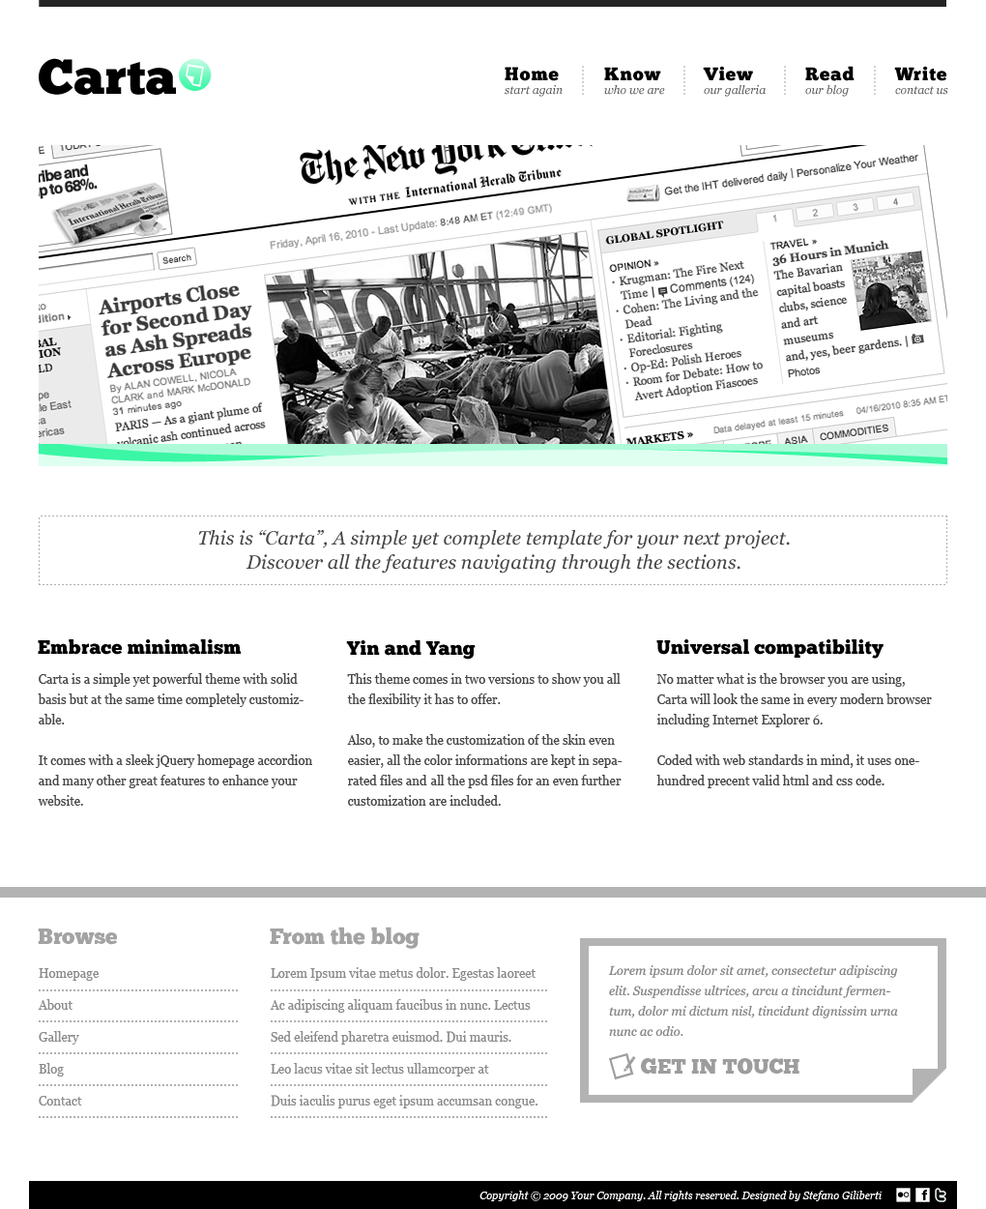
<style>
.page{position:relative;width:986px;height:1209px;background:#ffffff}
.page>*{position:absolute;margin:0}
.t1{font:49.1px "ChunkFive";color:#000000;scale:1.06 1}
.t2{font:18.4px "ChunkFive";letter-spacing:0.05em;color:#000000}
.t3{font:11.6px "Georgia-Italic";color:#555555}
.t4{font:19.3px/24.2px "Georgia-Italic";color:#474747}
.t5{font:19.3px "ChunkFive";letter-spacing:0.01em;color:#000000}
.t6{font:12.6px/20.3px "Georgia";color:#474747}
.t7{font:22.2px "ChunkFive";color:#a3a3a3}
.t8{font:12.6px/20.3px "Georgia-Italic";color:#878787}
.t9{font:12.6px "Georgia";color:#8a8a8a}
.t10{font:21.3px "ChunkFive";color:#9d9d9d}
.t11{font:10.6px "Georgia-Italic";color:#ffffff}
</style>
<div class="page">
<p class="t1" style="left:39px;top:58px;width:137px;height:37px">Carta</p>
<p class="t2" style="left:703px;top:66px;width:50px;height:15px">View</p>
<p class="t2" style="left:806px;top:66px;width:49px;height:15px">Read</p>
<p class="t2" style="left:895px;top:66px;width:52px;height:15px">Write</p>
<p class="t2" style="left:505px;top:67px;width:54px;height:14px">Home</p>
<p class="t2" style="left:604px;top:67px;width:57px;height:14px">Know</p>
<p class="t3" style="left:505px;top:85px;width:58px;height:12px">start again</p>
<p class="t3" style="left:604px;top:85px;width:61px;height:10px">who we are</p>
<p class="t3" style="left:704px;top:85px;width:62px;height:12px">our galleria</p>
<p class="t3" style="left:806px;top:85px;width:43px;height:12px">our blog</p>
<p class="t3" style="left:896px;top:86px;width:53px;height:9px">contact us</p>
<p class="t4" style="left:198px;top:530px;width:592px;height:43px;text-align:center">This is “Carta”, A simple yet complete template for your next project.<br>Discover all the features navigating through the sections.</p>
<p class="t5" style="left:38px;top:639px;width:203px;height:16px">Embrace minimalism</p>
<p class="t5" style="left:346px;top:640px;width:130px;height:20px">Yin and Yang</p>
<p class="t5" style="left:657px;top:639px;width:227px;height:20px">Universal compatibility</p>
<p class="t6" style="left:38px;top:673px;width:274px;height:133px">Carta is a simple yet powerful theme with solid basis but at the same time completely customizable.<br><br>It comes with a sleek jQuery homepage accordion <br>and many other great features to enhance your website.</p>
<p class="t6" style="left:347px;top:673px;width:276px;height:133px">This theme comes in two versions to show you all the flexibility it has to offer.<br><br>Also, to make the customization of the skin even easier, all the color informations are kept in separated files and all the psd files for an even further customization are included.</p>
<p class="t6" style="left:657px;top:673px;width:275px;height:115px">No matter what is the browser you are using, Carta will look the same in every modern browser including Internet Explorer 6.<br><br>Coded with web standards in mind, it uses one-hundred precent valid html and css code.</p>
<p class="t7" style="left:38px;top:928px;width:79px;height:17px">Browse</p>
<p class="t7" style="left:270px;top:926px;width:150px;height:23px">From the blog</p>
<p class="t8" style="left:608px;top:965px;width:290px;height:72px">Lorem ipsum dolor sit amet, consectetur adipiscing elit. Suspendisse ultrices, arcu a tincidunt fermentum, dolor mi dictum nisl, tincidunt dignissim urna nunc ac odio.</p>
<p class="t9" style="left:39px;top:968px;width:61px;height:13px">Homepage</p>
<p class="t9" style="left:271px;top:967px;width:265px;height:14px">Lorem Ipsum vitae metus dolor. Egestas laoreet</p>
<p class="t9" style="left:38px;top:999px;width:35px;height:11px">About</p>
<p class="t9" style="left:270px;top:999px;width:261px;height:14px">Ac adipiscing aliquam faucibus in nunc. Lectus</p>
<p class="t9" style="left:39px;top:1031px;width:40px;height:13px">Gallery</p>
<p class="t9" style="left:271px;top:1031px;width:241px;height:13px">Sed eleifend pharetra euismod. Dui mauris.</p>
<p class="t10" style="left:641px;top:1058px;width:159px;height:16px">GET IN TOUCH</p>
<p class="t9" style="left:39px;top:1063px;width:25px;height:13px">Blog</p>
<p class="t9" style="left:271px;top:1063px;width:218px;height:13px">Leo lacus vitae sit lectus ullamcorper at</p>
<p class="t9" style="left:39px;top:1096px;width:43px;height:9px">Contact</p>
<p class="t9" style="left:271px;top:1095px;width:267px;height:13px">Duis iaculis purus eget ipsum accumsan congue.</p>
<p class="t11" style="left:480px;top:1190px;width:403px;height:11px">Copyright © 2009 Your Company. All rights reserved. Designed by Stefano Giliberti</p>
</div>
